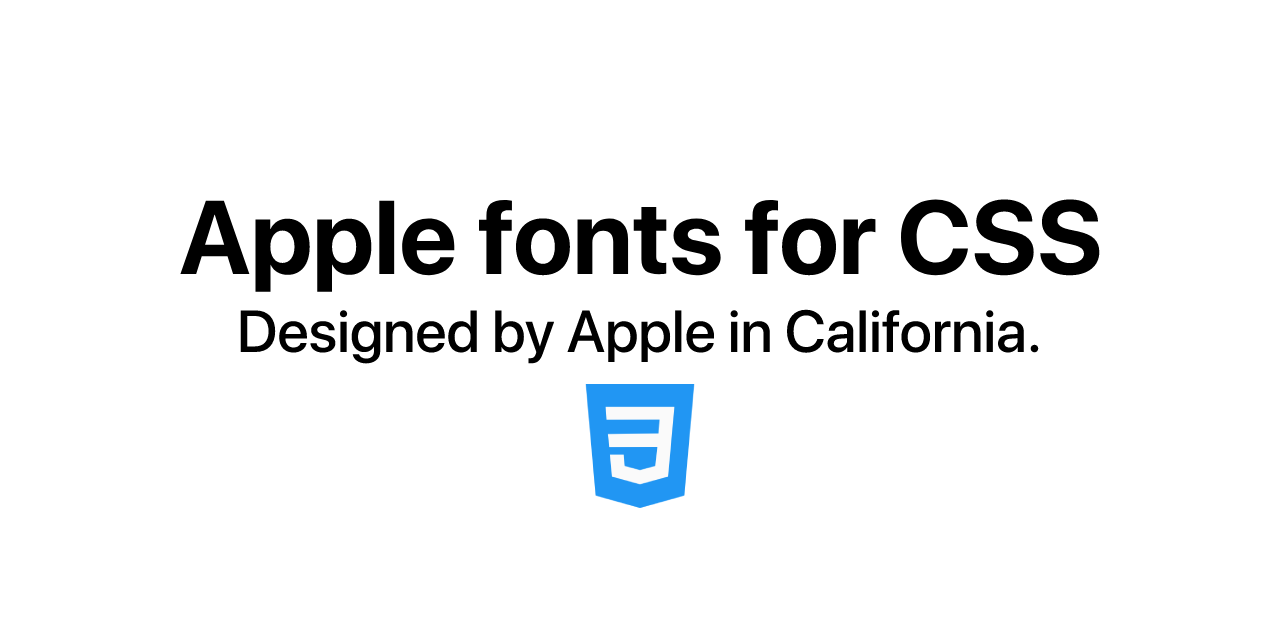
<style>
.page{position:relative;width:1280px;height:640px;background:#ffffff}
.page>*{position:absolute;margin:0}
.t1{font:104px "SFProDisplay-Bold";color:#000000}
.t2{font:59px "SFProDisplay-Medium";color:#000000}
</style>
<div class="page">
<p class="t1" style="left:180px;top:199px;width:920px;height:93px">Apple fonts for CSS</p>
<p class="t2" style="left:240px;top:309px;width:799px;height:55px">Designed by Apple in California.</p>
</div>
